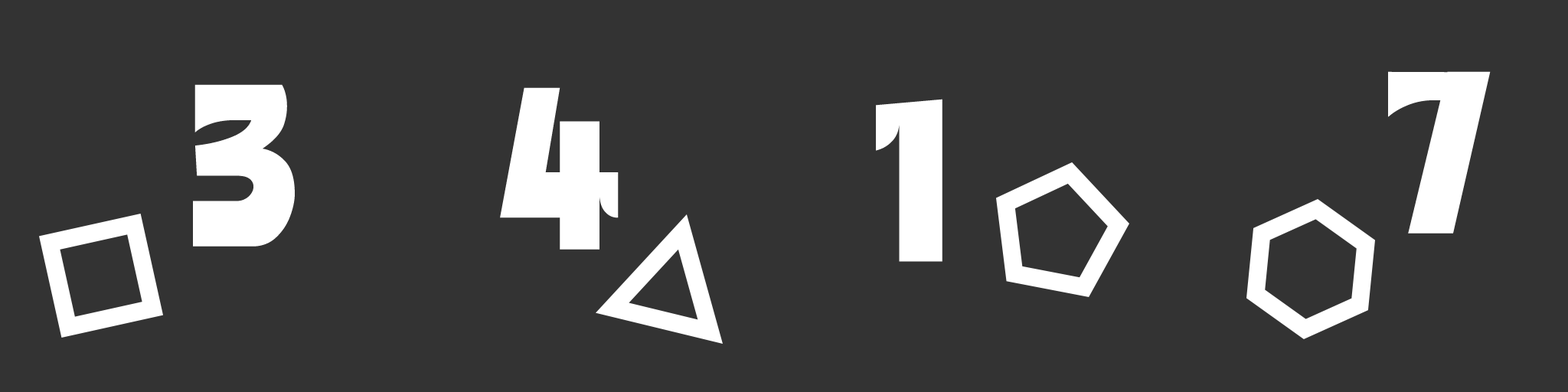
<style>
.page{position:relative;width:1568px;height:392px;background:#333333}
.page>*{position:absolute;margin:0}
.t1{font:215.1px "HSJiptokki-Black";letter-spacing:-0.02em;color:#ffffff}
</style>
<div class="page">
<p class="t1" style="left:1388px;top:71px;width:103px;height:163px">7</p>
<p class="t1" style="left:193px;top:84px;width:102px;height:163px">3</p>
<p class="t1" style="left:500px;top:87px;width:119px;height:163px">4</p>
<p class="t1" style="left:876px;top:99px;width:66px;height:163px">1</p>
</div>
